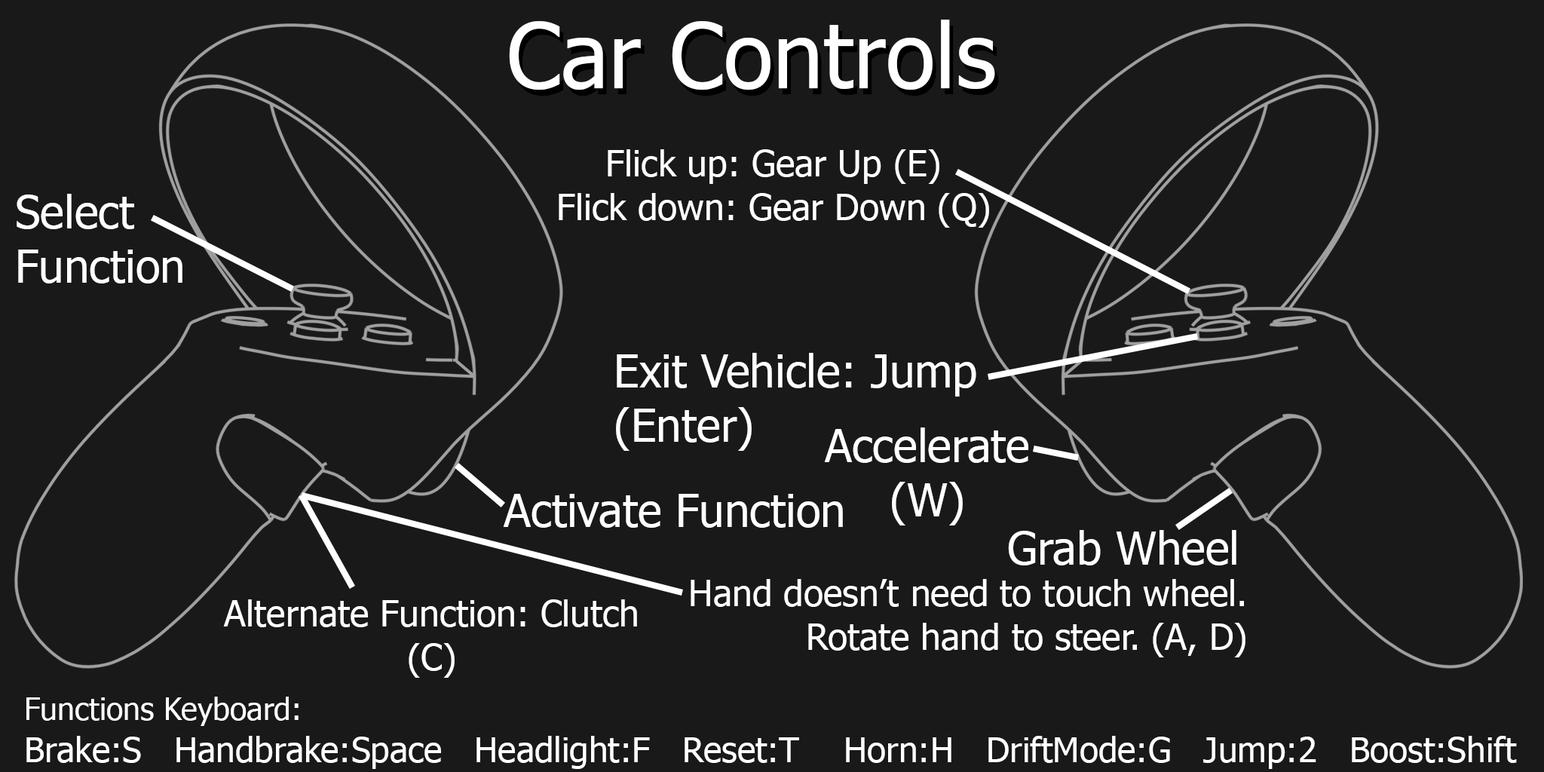
<style>
.page{position:relative;width:1544px;height:772px;background:#191919}
.page>*{position:absolute;margin:0}
.t1{font:90.5px "Tahoma";color:#ffffff}
.t2{font:36.2px "Tahoma";color:#ffffff}
.t3{font:45.2px "Tahoma";color:#ffffff}
.t4{font:34.7px "Tahoma";color:#ffffff}
.t5{font:30.9px "Tahoma";color:#ffffff}
</style>
<div class="page">
<p class="t1" style="left:509px;top:20px;width:486px;height:70px">Car Controls</p>
<p class="t2" style="left:559px;top:149px;width:430px;height:79px;text-align:center">Flick up: Gear Up (E)<br>Flick down: Gear Down (Q)</p>
<p class="t3" style="left:17px;top:194px;width:165px;height:90px">Select<br>Function</p>
<p class="t3" style="left:616px;top:353px;width:360px;height:98px">Exit Vehicle: Jump<br>(Enter)</p>
<p class="t3" style="left:824px;top:428px;width:205px;height:98px;text-align:center">Accelerate<br>(W)</p>
<p class="t3" style="left:503px;top:494px;width:340px;height:34px">Activate Function</p>
<p class="t3" style="left:1008px;top:530px;width:229px;height:36px">Grab Wheel</p>
<p class="t2" style="left:691px;top:579px;width:555px;height:79px;text-align:right">Hand doesn’t need to touch wheel.<br>Rotate hand to steer. (A, D)</p>
<p class="t2" style="left:223px;top:599px;width:414px;height:79px;text-align:center">Alternate Function: Clutch<br>(C)</p>
<p class="t4" style="left:26px;top:697px;width:1491px;height:72px"><span class="t5">Functions Keyboard:<br></span>Brake:S   Handbrake:Space   Headlight:F   Reset:T    Horn:H   DriftMode:G   Jump:2   Boost:Shift</p>
</div>
